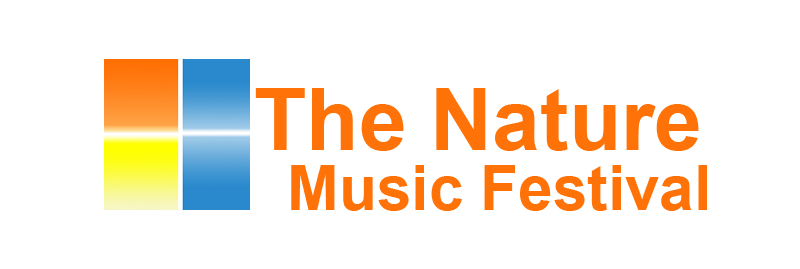
<style>
.page{position:relative;width:800px;height:269px;background:#ffffff}
.page>*{position:absolute;margin:0}
.t1{font:62px/60px "Arial-BoldMT";color:#ff7207}
.t2{font:85.8px "Arial-BoldMT";color:#ff7207}
</style>
<div class="page">
<p class="t1" style="left:255px;top:88px;width:452px;height:123px"><span class="t2">The Nature<br>  </span>Music Festival</p>
</div>
